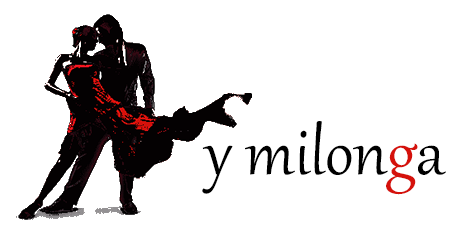
<style>
.page{position:relative;width:472px;height:242px;background:#ffffff}
.page>*{position:absolute;margin:0}
.t1{font:80px "Gabriola";color:#000000}
.t2{font:80px "Gabriola";color:#d5110b}
</style>
<div class="page">
<p class="t1" style="left:202px;top:121px;width:244px;height:74px">y milon<span class="t2">g</span>a</p>
</div>
